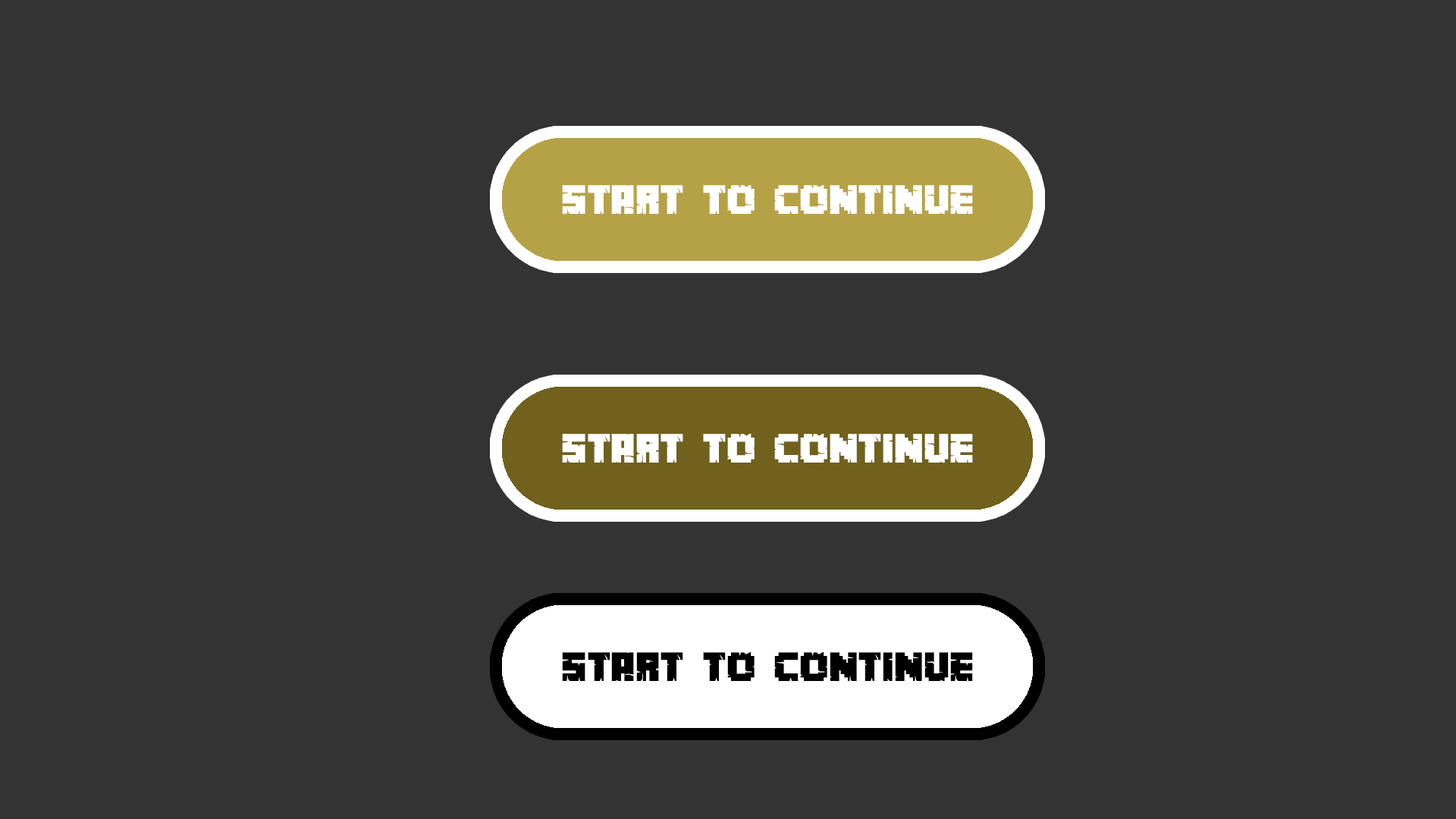
<style>
.page{position:relative;width:1456px;height:819px;background:#333333}
.page>*{position:absolute;margin:0}
.t1{font:36.4px "MinecrafterAlt";color:#ffffff}
.t2{font:36.4px "MinecrafterAlt";color:#000000}
</style>
<div class="page">
<p class="t1" style="left:562px;top:185px;width:411px;height:30px">START TO CONTINUE</p>
<p class="t1" style="left:562px;top:434px;width:411px;height:29px">START TO CONTINUE</p>
<p class="t2" style="left:562px;top:652px;width:411px;height:30px">START TO CONTINUE</p>
</div>
